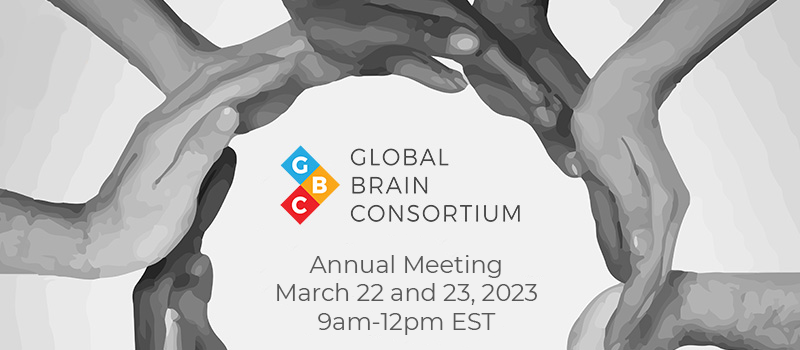
<style>
.page{position:relative;width:800px;height:350px;background:#f1f1f1}
.page>*{position:absolute;margin:0}
.t1{font:24px "Montserrat-Regular";color:#585858}
</style>
<div class="page">
<p class="t1" style="left:277px;top:255px;width:260px;height:80px;text-align:center">Annual Meeting<br>March 22 and 23, 2023<br>9am-12pm EST</p>
</div>
